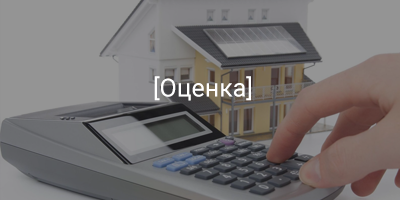
<style>
.page{position:relative;width:400px;height:200px;background:#949494}
.page>*{position:absolute;margin:0}
.t1{font:25px "Roboto-Regular";color:#ffffff}
</style>
<div class="page">
<p class="t1" style="left:154px;top:76px;width:97px;height:25px">[Оценка]</p>
</div>
